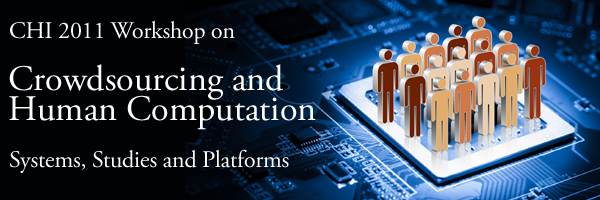
<style>
.page{position:relative;width:600px;height:200px;background:#010204}
.page>*{position:absolute;margin:0}
.t1{font:24px "AGaramondPro-Regular";letter-spacing:-0.01em;color:#ffffff}
.t2{font:36px/30px "AGaramondPro-Regular";color:#ffffff}
</style>
<div class="page">
<p class="t1" style="left:10px;top:20px;width:225px;height:24px">CHI 2011 Workshop on</p>
<p class="t2" style="left:9px;top:64px;width:307px;height:66px">Crowdsourcing and<br>Human Computation</p>
<p class="t1" style="left:10px;top:149px;width:279px;height:24px">Systems, Studies and Platforms</p>
</div>
